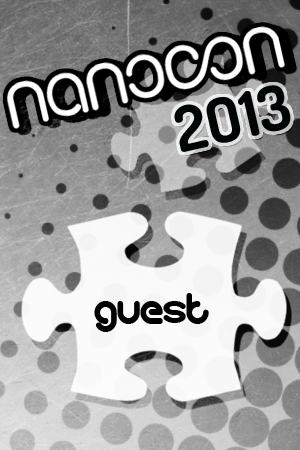
<style>
.page{position:relative;width:300px;height:450px}
.page>*{position:absolute;margin:0}
.t1{font:62.5px "Dosis-Bold";color:#000405}
.t2{font:41.7px "gitchgitch";color:#000000}
</style>
<div class="page">
<p class="t1" style="left:174px;top:85px;width:117px;height:67px;rotate:-13deg">2O13</p>
<p class="t2" style="left:94px;top:293px;width:115px;height:39px">guest</p>
</div>
